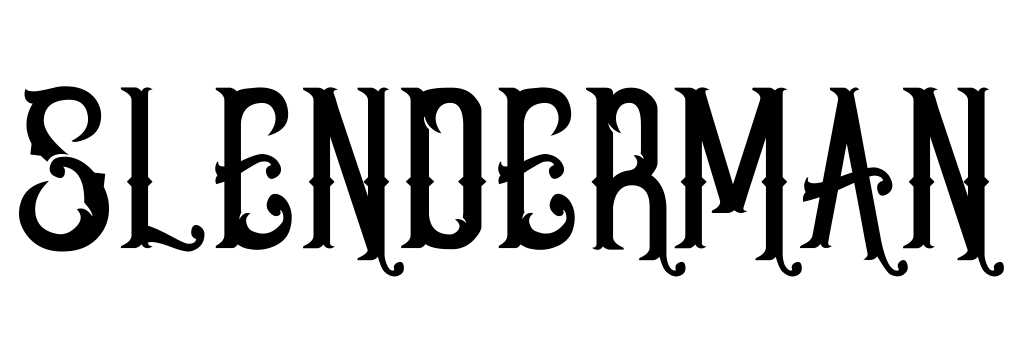
<style>
.page{position:relative;width:1024px;height:341px;background:#ffffff}
.page>*{position:absolute;margin:0}
.t1{font:229.2px "MorningGlory";color:#000000}
</style>
<div class="page">
<p class="t1" style="left:19px;top:86px;width:985px;height:191px">SLENDERMAN</p>
</div>
